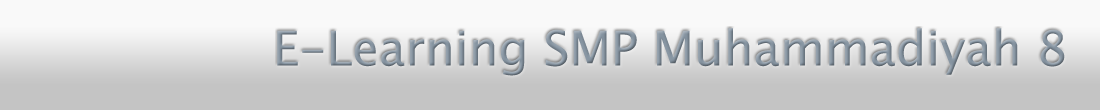
<style>
.page{position:relative;width:1100px;height:110px;background:#f9f9f9}
.page>*{position:absolute;margin:0}
.t1{font:48px "LucidaSansUnicode"}
</style>
<div class="page">
<p class="t1" style="left:277px;top:28px;width:788px;height:48px">E-Learning SMP Muhammadiyah 8</p>
</div>
